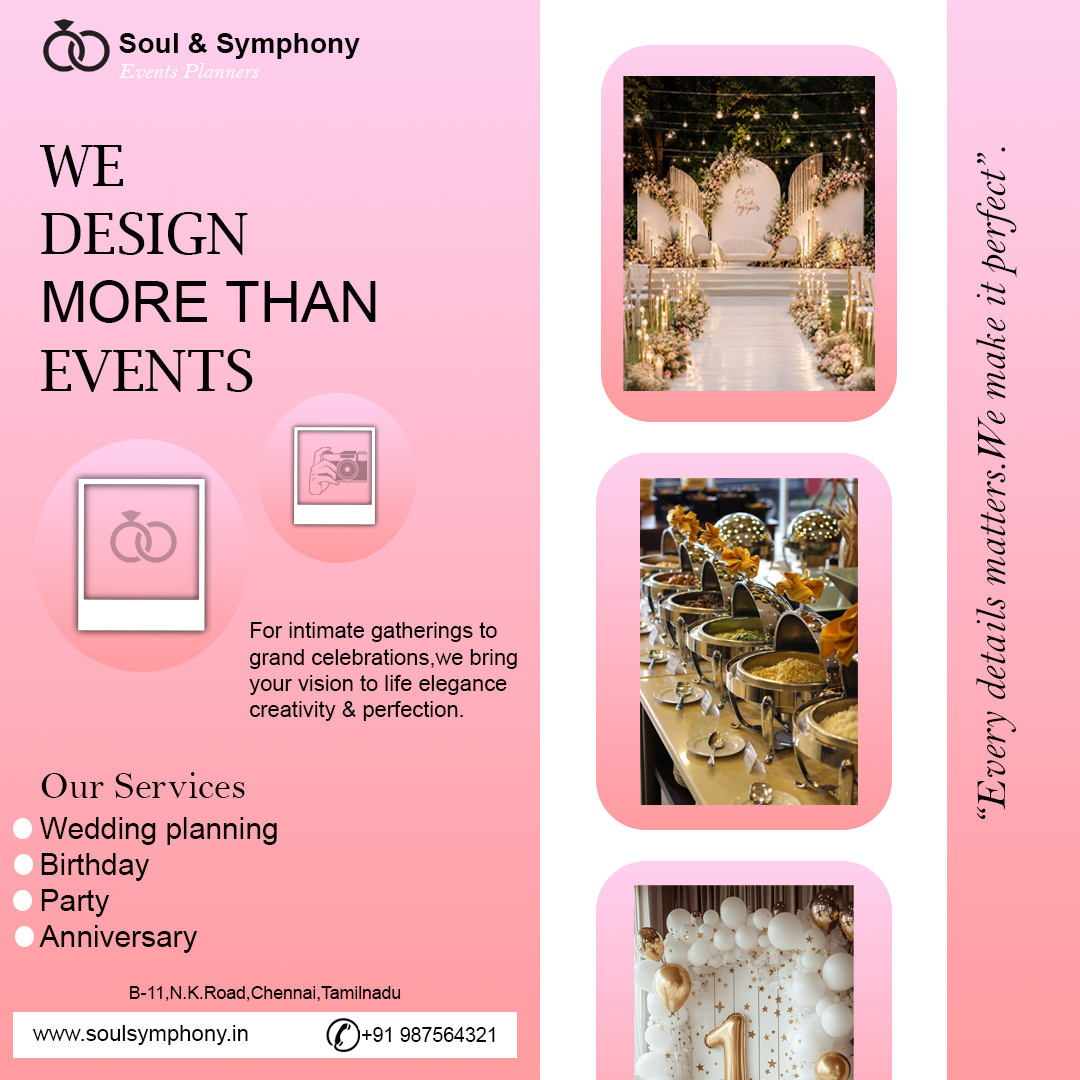
<style>
.page{position:relative;width:1080px;height:1080px}
.page>*{position:absolute;margin:0}
.t1{font:28.2px "Arial-BoldMT";color:#000000}
.t2{font:22.8px "BellMTItalic";color:#fdfbfb}
.t3{font:56.9px "LucidaBright";color:#000000}
.t4{font:56.9px "ArialMT";color:#000000}
.t5{font:42.9px "BellMTItalic";color:#000000}
.t6{font:21.9px "ArialMT";color:#000000}
.t7{font:39.3px "BellMT";color:#000000}
.t8{font:29.9px "ArialMT";color:#000000}
.t9{font:17.6px "ArialMT";color:#000000}
.t10{font:22.1px "ArialMT";color:#000000}
.t11{font:19.5px "ArialMT";color:#000000}
</style>
<div class="page">
<p class="t1" style="left:119px;top:33px;width:241px;height:26px">Soul &amp; Symphony</p>
<p class="t2" style="left:118px;top:63px;width:141px;height:15px">Events Planners</p>
<p class="t3" style="left:40px;top:145px;width:336px;height:247px">WE<br>DESIGN<br><span class="t4">MORE THAN<br></span>EVENTS</p>
<p class="t5" style="left:976px;top:147px;width:41px;height:672px;rotate:-90deg">“Every details matters.We make it perfect”.</p>
<p class="t6" style="left:249px;top:622px;width:268px;height:99px">For intimate gatherings to <br>grand celebrations,we bring<br>your vision to life elegance<br>creativity &amp; perfection.</p>
<p class="t7" style="left:41px;top:772px;width:204px;height:26px">Our Services</p>
<p class="t8" style="left:39px;top:817px;width:238px;height:136px">Wedding planning<br>Birthday<br>Party<br>Anniversary</p>
<p class="t9" style="left:130px;top:986px;width:271px;height:15px">B-11,N.K.Road,Chennai,Tamilnadu</p>
<p class="t10" style="left:32px;top:1025px;width:216px;height:20px">www.soulsymphony.in</p>
<p class="t11" style="left:362px;top:1027px;width:133px;height:15px">+91 987564321</p>
</div>
